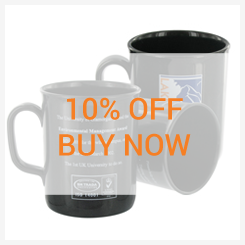
<style>
.page{position:relative;width:245px;height:245px;background:#ffffff}
.page>*{position:absolute;margin:0}
.t1{font:30px "Roboto-Medium";color:#f67f24}
</style>
<div class="page">
<p class="t1" style="left:59px;top:97px;width:132px;height:59px;text-align:center">10% OFF<br>BUY NOW</p>
</div>
